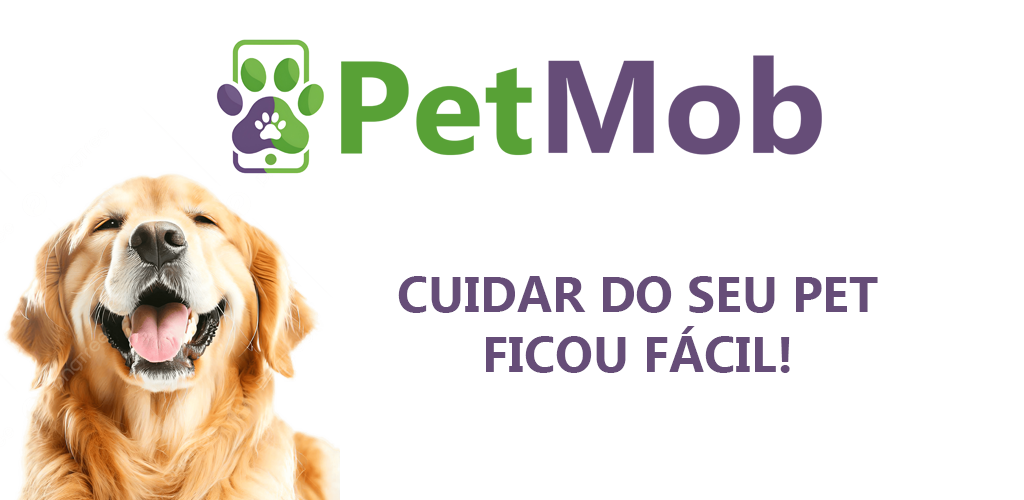
<style>
.page{position:relative;width:1024px;height:500px;background:#ffffff}
.page>*{position:absolute;margin:0}
.t1{font:50px "Ebrima-Bold";color:#664d78}
</style>
<div class="page">
<p class="t1" style="left:398px;top:276px;width:480px;height:97px;text-align:center">CUIDAR DO SEU PET<br>FICOU FÁCIL!</p>
</div>
